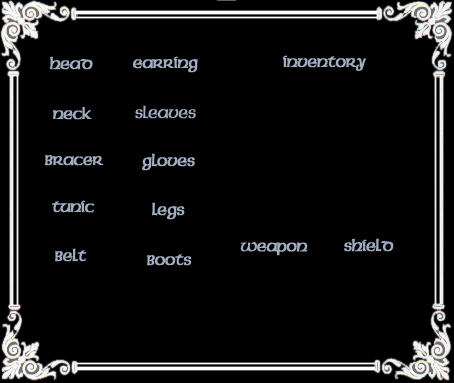
<style>
.page{position:relative;width:454px;height:383px;background:#000000}
.page>*{position:absolute;margin:0}
.t1{font:18px "Celtic-Condensed-Bold";color:#9faec3}
.t2{font:18px "Celtic-CondensedNormal";color:#9faec3}
</style>
<div class="page">
<p class="t1" style="left:50px;top:56px;width:43px;height:14px">Head</p>
<p class="t1" style="left:133px;top:56px;width:65px;height:17px">Earring</p>
<p class="t1" style="left:282px;top:55px;width:84px;height:16px">Inventory</p>
<p class="t1" style="left:52px;top:107px;width:40px;height:13px">Neck</p>
<p class="t2" style="left:135px;top:105px;width:61px;height:14px">Sleaves</p>
<p class="t1" style="left:45px;top:155px;width:59px;height:11px">Bracer</p>
<p class="t1" style="left:142px;top:153px;width:53px;height:18px">Gloves</p>
<p class="t1" style="left:51px;top:200px;width:44px;height:13px">Tunic</p>
<p class="t1" style="left:152px;top:202px;width:33px;height:18px">legs</p>
<p class="t1" style="left:240px;top:241px;width:68px;height:15px"><span class="t2">W</span>eapon</p>
<p class="t1" style="left:344px;top:238px;width:50px;height:14px">Shield</p>
<p class="t1" style="left:55px;top:248px;width:32px;height:14px">Belt</p>
<p class="t1" style="left:147px;top:254px;width:45px;height:12px">Boots</p>
</div>
